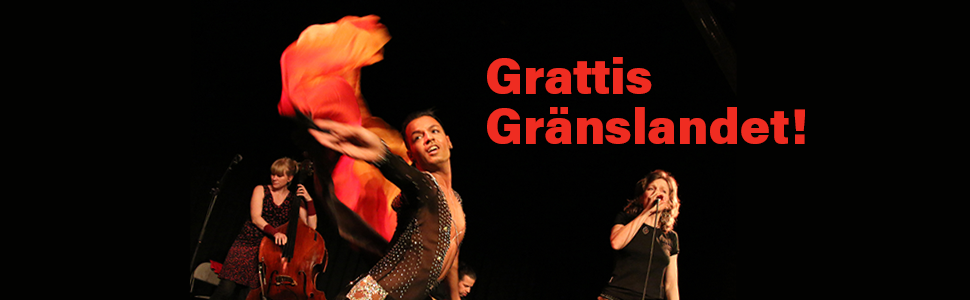
<style>
.page{position:relative;width:970px;height:300px;background:#020201}
.page>*{position:absolute;margin:0}
.t1{font:50px/50px "AcuminPro-Black";color:#ef2c21}
</style>
<div class="page">
<p class="t1" style="left:487px;top:57px;width:318px;height:87px">Grattis<br>Gränslandet!</p>
</div>
